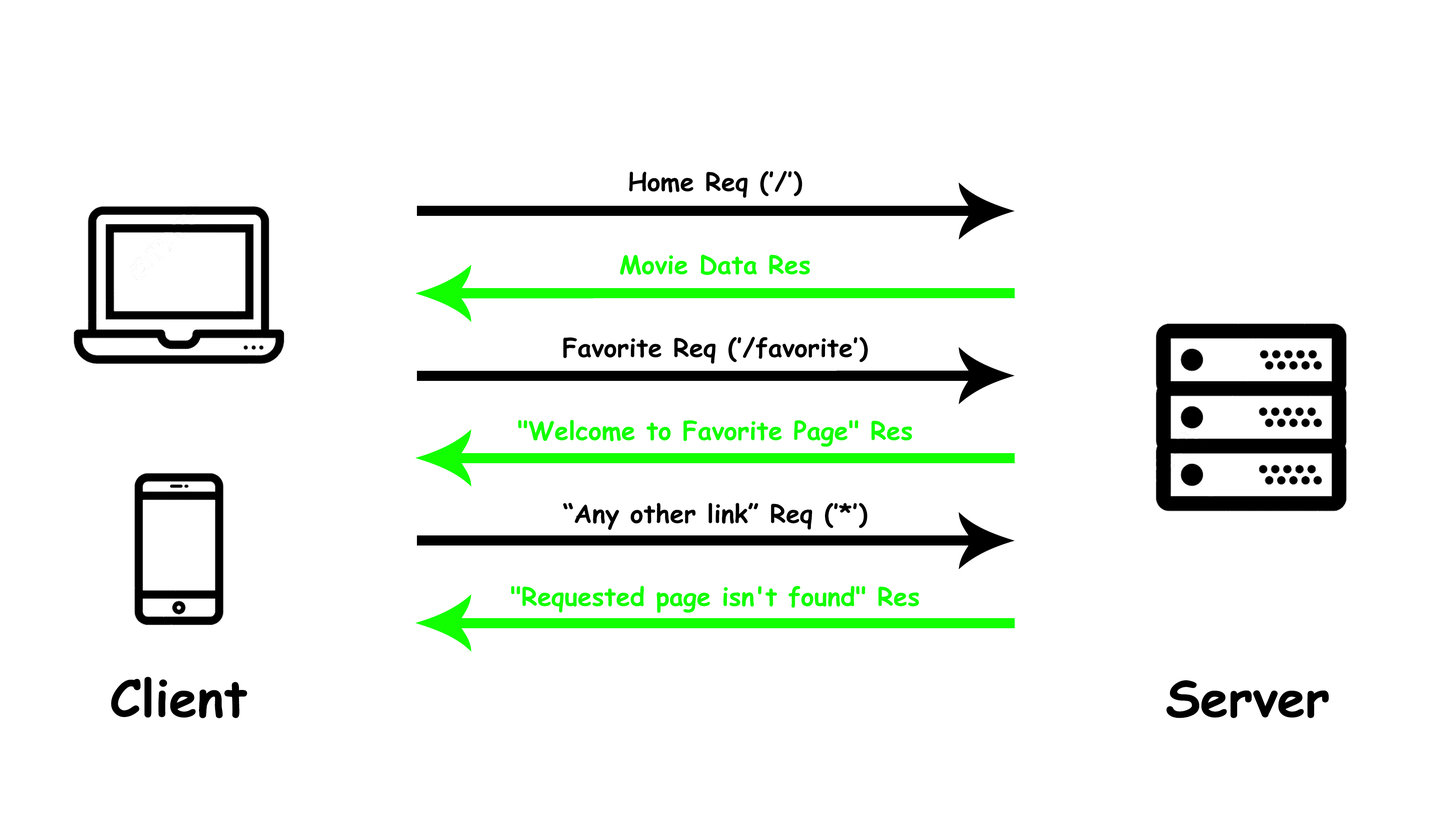
<style>
.page{position:relative;width:1430px;height:834px;background:#ffffff}
.page>*{position:absolute;margin:0}
.t1{font:25.2px "ComicSansMS-Bold";color:#000000}
.t2{font:25.2px "ComicSansMS-Bold";color:#12ff00}
.t3{font:50.4px "ComicSansMS-Bold";color:#000000}
</style>
<div class="page">
<p class="t1" style="left:629px;top:171px;width:173px;height:27px">Home Req (’/’)</p>
<p class="t2" style="left:620px;top:255px;width:190px;height:20px">Movie Data Res</p>
<p class="t1" style="left:563px;top:337px;width:305px;height:27px">Favorite Req (’/favorite’)</p>
<p class="t2" style="left:518px;top:420px;width:394px;height:27px">"Welcome to Favorite Page" Res</p>
<p class="t1" style="left:563px;top:503px;width:304px;height:27px">“Any other link” Req (’*’)</p>
<p class="t2" style="left:511px;top:586px;width:408px;height:27px">"Requested page isn't found" Res</p>
<p class="t3" style="left:111px;top:677px;width:136px;height:41px">Client</p>
<p class="t3" style="left:1166px;top:680px;width:162px;height:38px">Server</p>
</div>
